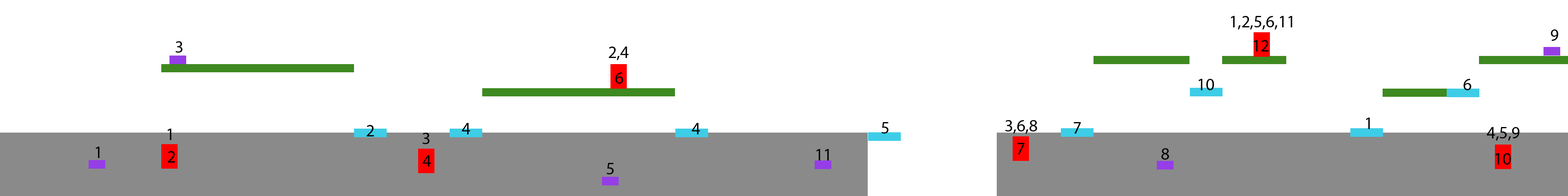
<style>
.page{position:relative;width:1568px;height:196px;background:#ffffff}
.page>*{position:absolute;margin:0}
.t1{font:17px "MyriadPro-Regular";color:#000000}
</style>
<div class="page">
<p class="t1" style="left:1231px;top:16px;width:61px;height:14px">1,2,5,6,11</p>
<p class="t1" style="left:1551px;top:29px;width:7px;height:12px">9</p>
<p class="t1" style="left:176px;top:41px;width:7px;height:12px">3</p>
<p class="t1" style="left:1254px;top:40px;width:15px;height:11px">12</p>
<p class="t1" style="left:609px;top:47px;width:20px;height:13px">2,4</p>
<p class="t1" style="left:615px;top:72px;width:8px;height:12px">6</p>
<p class="t1" style="left:1198px;top:79px;width:16px;height:11px">10</p>
<p class="t1" style="left:1463px;top:79px;width:8px;height:11px">6</p>
<p class="t1" style="left:367px;top:125px;width:7px;height:11px">2</p>
<p class="t1" style="left:462px;top:123px;width:8px;height:11px">4</p>
<p class="t1" style="left:692px;top:123px;width:8px;height:11px">4</p>
<p class="t1" style="left:882px;top:122px;width:7px;height:12px">5</p>
<p class="t1" style="left:1005px;top:120px;width:32px;height:14px">3,6,8</p>
<p class="t1" style="left:1074px;top:122px;width:7px;height:12px">7</p>
<p class="t1" style="left:1366px;top:118px;width:4px;height:11px">1</p>
<p class="t1" style="left:167px;top:129px;width:5px;height:11px">1</p>
<p class="t1" style="left:423px;top:133px;width:7px;height:11px">3</p>
<p class="t1" style="left:1487px;top:127px;width:32px;height:14px">4,5,9</p>
<p class="t1" style="left:96px;top:147px;width:4px;height:11px">1</p>
<p class="t1" style="left:816px;top:149px;width:13px;height:11px">11</p>
<p class="t1" style="left:1017px;top:143px;width:8px;height:11px">7</p>
<p class="t1" style="left:1161px;top:148px;width:8px;height:12px">8</p>
<p class="t1" style="left:168px;top:151px;width:7px;height:12px">2</p>
<p class="t1" style="left:423px;top:155px;width:8px;height:12px">4</p>
<p class="t1" style="left:1495px;top:153px;width:16px;height:12px">10</p>
<p class="t1" style="left:607px;top:163px;width:7px;height:11px">5</p>
</div>
